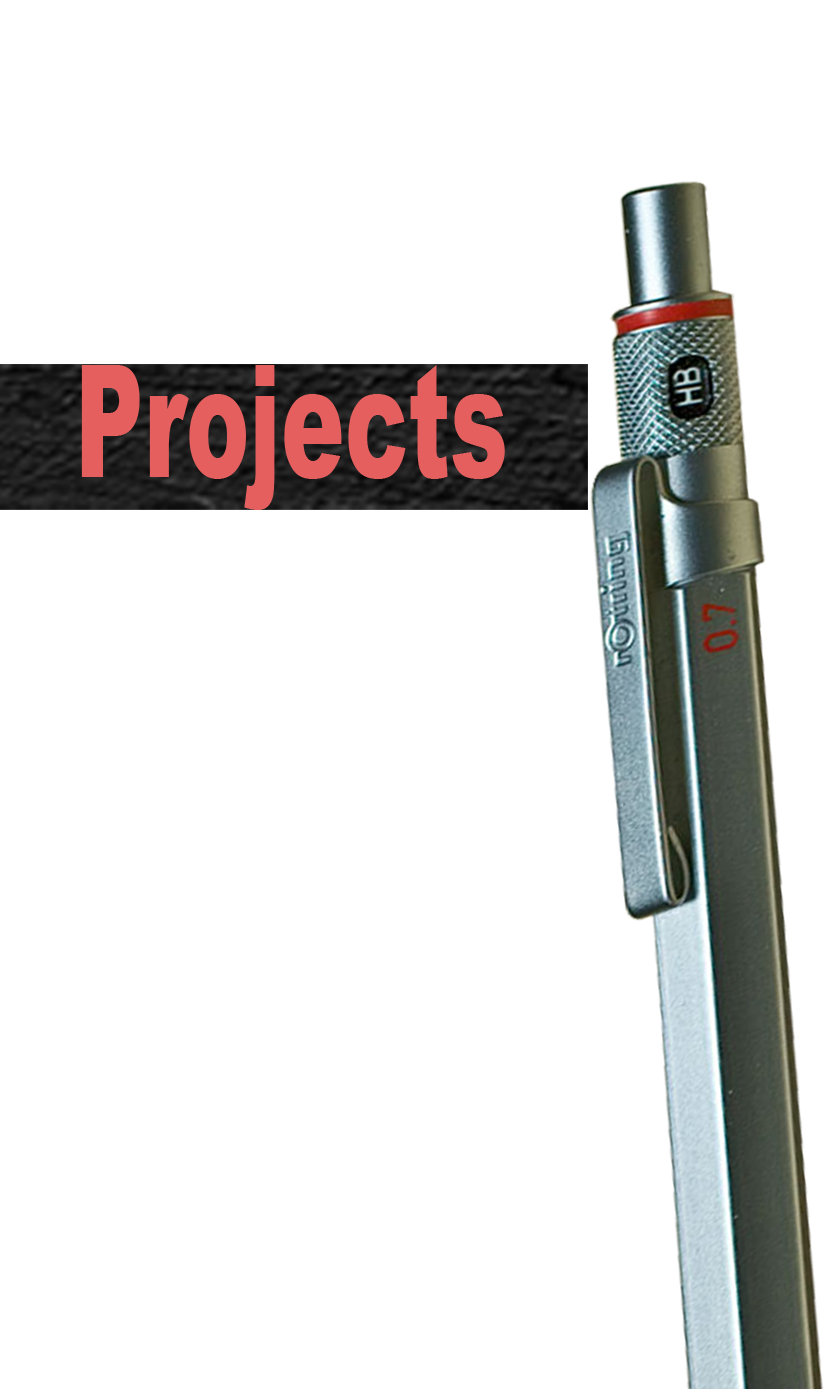
<style>
.page{position:relative;width:828px;height:1389px;background:#ffffff}
.page>*{position:absolute;margin:0}
.t1{font:156.2px "Arial-Black";color:#e55f5f;scale:0.61 1}
</style>
<div class="page">
<p class="t1" style="left:81px;top:365px;width:424px;height:145px">Projects</p>
</div>
